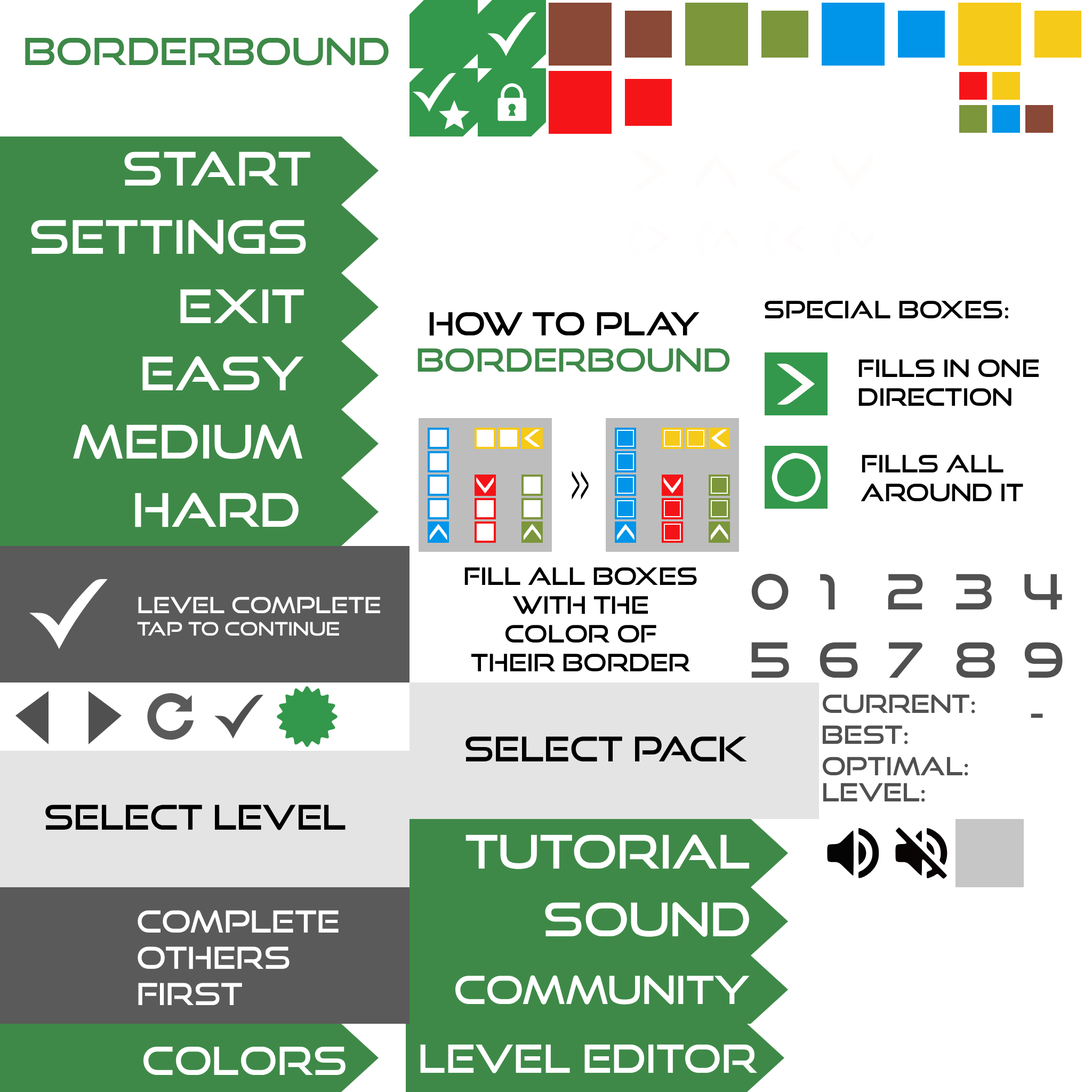
<style>
.page{position:relative;width:1092px;height:1092px;background:#ffffff}
.page>*{position:absolute;margin:0}
.t1{font:37.3px "GoodTimes-Regular";color:#3e8948}
.t2{font:46.4px "GoodTimes-Regular";color:#ffffff}
.t3{font:24px "GoodTimes-Regular";color:#000000}
.t4{font:32px "GoodTimes-Regular";color:#000000}
.t5{font:32px "GoodTimes-Regular";color:#3e8948}
.t6{font:53.3px "GoodTimesRg-Regular";color:#000000;scale:0.25 1}
.t7{font:48.5px "GoodTimes-Regular";color:#505050}
.t8{font:18.7px "GoodTimes-Regular";color:#ffffff}
.t9{font:22.4px "GoodTimes-Regular";color:#ffffff}
.t10{font:25.1px "GoodTimes-Regular";color:#505050}
.t11{font:34.1px "GoodTimes-Regular";color:#000000}
.t12{font:30.4px "GoodTimes-Regular";color:#ffffff}
.t13{font:38.9px "GoodTimes-Regular";color:#ffffff}
</style>
<div class="page">
<p class="t1" style="left:25px;top:37px;width:364px;height:29px">BorderBound</p>
<p class="t2" style="left:124px;top:151px;width:186px;height:35px">Start</p>
<p class="t2" style="left:31px;top:219px;width:275px;height:35px">Settings</p>
<p class="t2" style="left:180px;top:289px;width:124px;height:34px">Exit</p>
<p class="t3" style="left:765px;top:300px;width:243px;height:19px">Special boxes:</p>
<p class="t4" style="left:429px;top:311px;width:271px;height:25px">How to play</p>
<p class="t5" style="left:417px;top:348px;width:313px;height:24px">BorderBound</p>
<p class="t2" style="left:142px;top:356px;width:162px;height:34px">EASY</p>
<p class="t3" style="left:858px;top:359px;width:181px;height:47px">Fills in one<br>direction</p>
<p class="t2" style="left:73px;top:424px;width:230px;height:35px">MEDIUM</p>
<p class="t3" style="left:861px;top:454px;width:162px;height:48px">Fills all <br>around it</p>
<p class="t6" style="left:572px;top:471px;width:17px;height:29px">&gt;&gt;</p>
<p class="t2" style="left:135px;top:492px;width:164px;height:35px">HARD</p>
<p class="t3" style="left:464px;top:567px;width:233px;height:105px;text-align:center">Fill all boxes <br>with the<br>color of<br>their border</p>
<p class="t7" style="left:751px;top:574px;width:38px;height:36px">0</p>
<p class="t7" style="left:820px;top:574px;width:15px;height:35px">1</p>
<p class="t7" style="left:888px;top:574px;width:35px;height:35px">2</p>
<p class="t7" style="left:956px;top:574px;width:36px;height:35px">3</p>
<p class="t7" style="left:1024px;top:574px;width:38px;height:35px">4</p>
<p class="t8" style="left:137px;top:597px;width:243px;height:39px"><span class="t9">Level Complete<br></span>Tap To Continue</p>
<p class="t7" style="left:751px;top:642px;width:38px;height:36px">5</p>
<p class="t7" style="left:820px;top:642px;width:38px;height:36px">6</p>
<p class="t7" style="left:889px;top:642px;width:33px;height:36px">7</p>
<p class="t7" style="left:956px;top:642px;width:39px;height:36px">8</p>
<p class="t7" style="left:1024px;top:642px;width:39px;height:36px">9</p>
<p class="t10" style="left:822px;top:694px;width:153px;height:19px">Current:</p>
<p class="t7" style="left:1031px;top:713px;width:12px;height:5px">-</p>
<p class="t10" style="left:822px;top:725px;width:86px;height:19px">Best:</p>
<p class="t11" style="left:465px;top:736px;width:282px;height:25px">Select Pack</p>
<p class="t10" style="left:822px;top:757px;width:146px;height:19px">Optimal:</p>
<p class="t10" style="left:823px;top:783px;width:102px;height:19px">Level:</p>
<p class="t11" style="left:45px;top:805px;width:301px;height:25px">Select level</p>
<p class="t2" style="left:465px;top:834px;width:285px;height:35px">Tutorial</p>
<p class="t2" style="left:545px;top:902px;width:204px;height:35px">Sound</p>
<p class="t12" style="left:138px;top:910px;width:201px;height:95px">Complete<br>Others<br>First</p>
<p class="t13" style="left:455px;top:975px;width:295px;height:30px">Community</p>
<p class="t13" style="left:143px;top:1046px;width:203px;height:29px">Colors</p>
<p class="t13" style="left:420px;top:1044px;width:338px;height:29px">Level editor</p>
</div>
